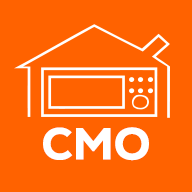
<style>
.page{position:relative;width:192px;height:192px;background:#ff6200}
.page>*{position:absolute;margin:0}
.t1{font:44.3px "Nexa-Heavy";color:#ffffff}
</style>
<div class="page">
<p class="t1" style="left:43px;top:127px;width:106px;height:34px">CMO</p>
</div>
